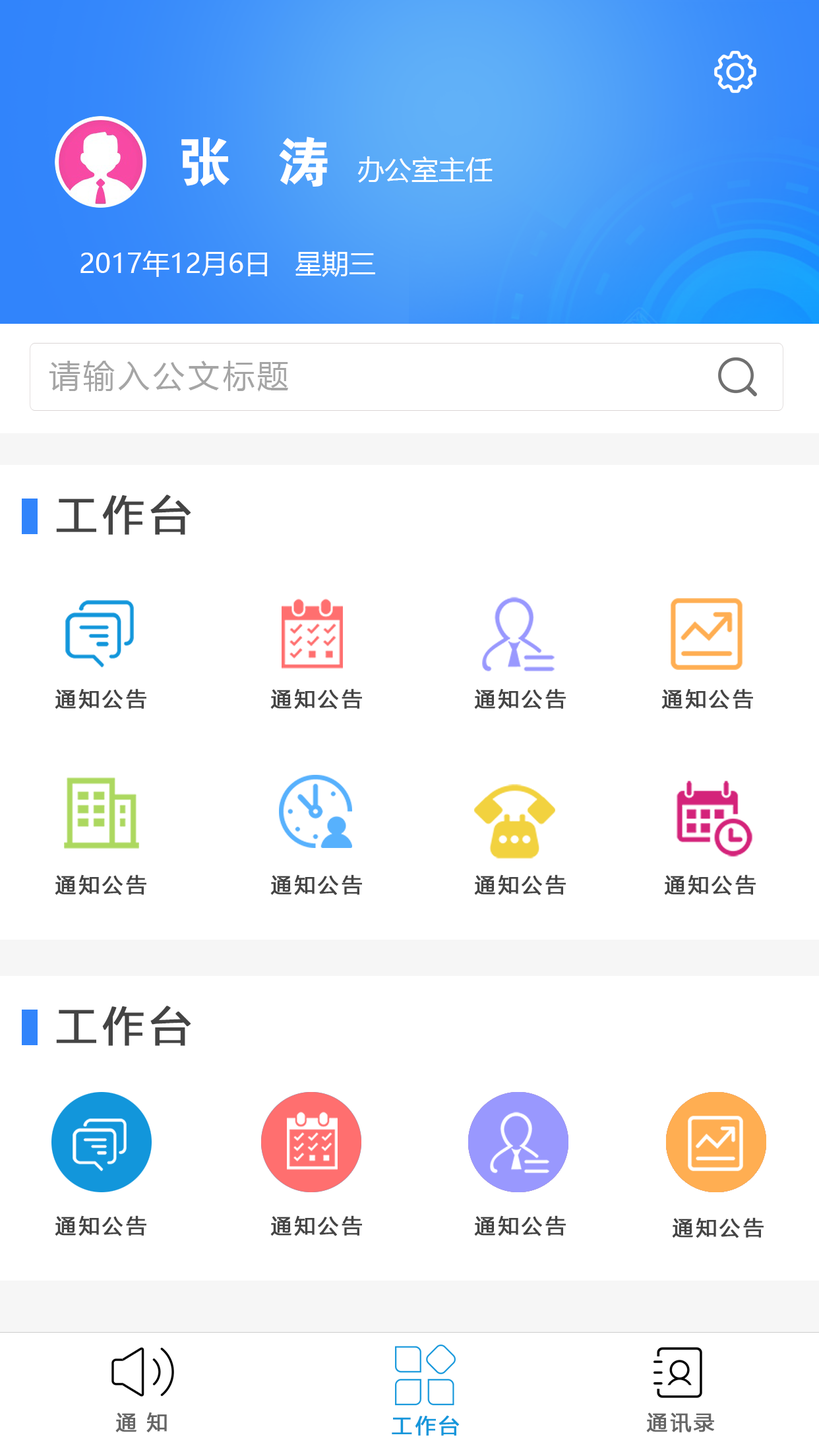
<style>
.page{position:relative;width:819px;height:1456px;background:#ffffff}
.page>*{position:absolute;margin:0}
.t1{font:53.4px "FZDHTJW--GB1-0";letter-spacing:0.1em;color:#ffffff}
.t2{font:27px "MicrosoftYaHei";color:#ffffff}
.t3{font:31.7px "MicrosoftYaHei";letter-spacing:0.1em;color:#a5a5a5}
.t4{font:42.2px "FZLTHK--GBK1-0";letter-spacing:0.08em;color:#444444;font-weight:bold}
.t5{font:21.1px "FZLTHK--GBK1-0";letter-spacing:0.08em;color:#444444;font-weight:bold}
.t6{font:21.1px "FZLTHK--GBK1-0";letter-spacing:0.08em;color:#666666;font-weight:bold}
.t7{font:21.1px "FZLTHK--GBK1-0";letter-spacing:0.08em;color:#1497db;font-weight:bold}
</style>
<div class="page">
<p class="t1" style="left:181px;top:136px;width:147px;height:51px">张  涛</p>
<p class="t2" style="left:357px;top:156px;width:136px;height:27px">办公室主任</p>
<p class="t2" style="left:80px;top:251px;width:295px;height:26px">2017年12月6日   星期三</p>
<p class="t3" style="left:49px;top:361px;width:239px;height:31px">请输入公文标题</p>
<p class="t4" style="left:56px;top:495px;width:135px;height:40px">工作台</p>
<p class="t5" style="left:55px;top:688px;width:91px;height:21px">通知公告</p>
<p class="t5" style="left:270px;top:688px;width:92px;height:21px">通知公告</p>
<p class="t5" style="left:474px;top:688px;width:92px;height:21px">通知公告</p>
<p class="t5" style="left:661px;top:688px;width:92px;height:21px">通知公告</p>
<p class="t5" style="left:55px;top:874px;width:91px;height:21px">通知公告</p>
<p class="t5" style="left:270px;top:874px;width:92px;height:21px">通知公告</p>
<p class="t5" style="left:474px;top:874px;width:92px;height:21px">通知公告</p>
<p class="t5" style="left:664px;top:874px;width:92px;height:21px">通知公告</p>
<p class="t4" style="left:56px;top:1006px;width:135px;height:40px">工作台</p>
<p class="t5" style="left:55px;top:1215px;width:91px;height:21px">通知公告</p>
<p class="t5" style="left:270px;top:1215px;width:92px;height:21px">通知公告</p>
<p class="t5" style="left:474px;top:1215px;width:92px;height:21px">通知公告</p>
<p class="t5" style="left:672px;top:1217px;width:92px;height:21px">通知公告</p>
<p class="t6" style="left:115px;top:1412px;width:52px;height:20px">通 知</p>
<p class="t7" style="left:392px;top:1415px;width:68px;height:21px">工作台</p>
<p class="t6" style="left:646px;top:1412px;width:68px;height:21px">通讯录</p>
</div>
